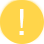
<style>
.page{position:relative;width:44px;height:44px;background:#ffd54a}
.page>*{position:absolute;margin:0}
.t1{font:36px "HelveticaNeue";color:#ffffff}
</style>
<div class="page">
<p class="t1" style="left:19px;top:9px;width:5px;height:26px">!</p>
</div>
